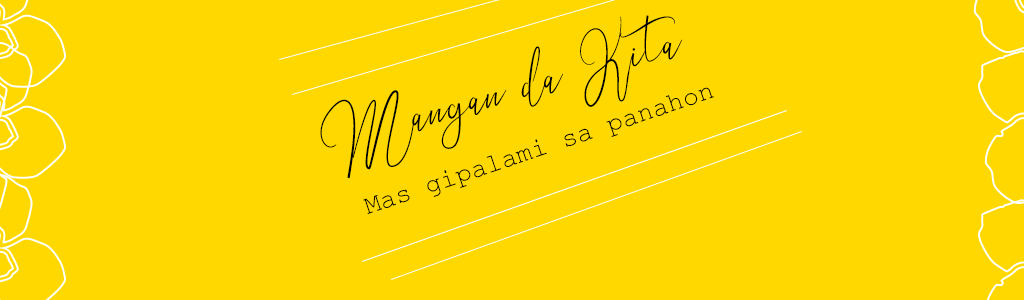
<style>
.page{position:relative;width:1024px;height:300px;background:#ffd800}
.page>*{position:absolute;margin:0}
.t1{font:67.6px "AlifiyahRegular";color:#000000}
.t2{font:26.6px "CourierNewPSMT";color:#000000}
</style>
<div class="page">
<p class="t1" style="left:320px;top:15px;width:362px;height:164px;rotate:-16deg">Mangan da Kita</p>
<p class="t2" style="left:363px;top:87px;width:351px;height:127px;rotate:-19deg">Mas gipalami sa panahon</p>
</div>
